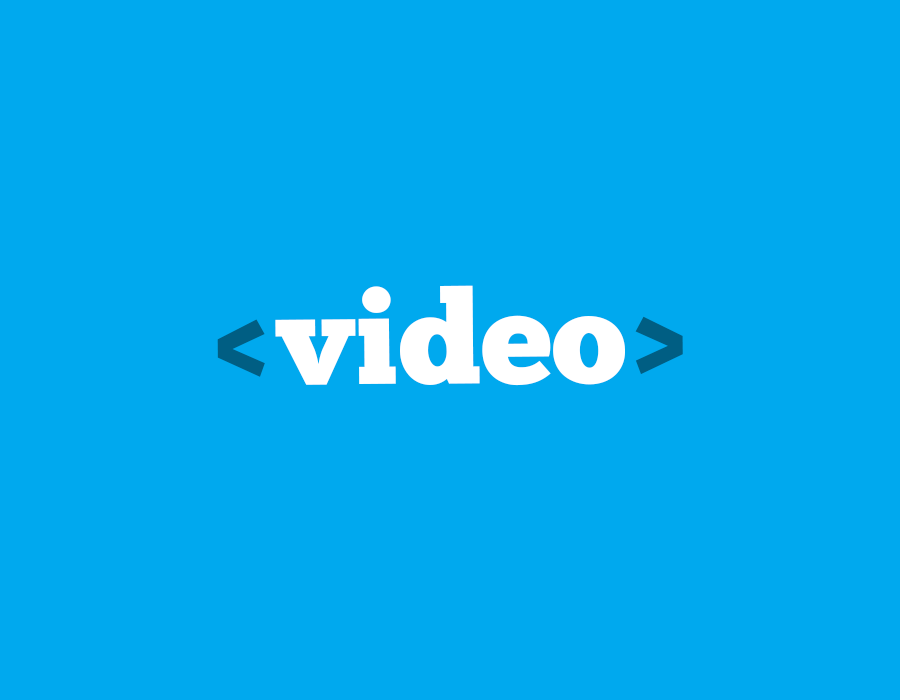
<style>
.page{position:relative;width:900px;height:700px;background:#00a9ee}
.page>*{position:absolute;margin:0}
.t1{font:130.1px "ChunkFive-Roman";color:#ffffff}
.t2{font:130.1px "ChunkFive-Roman";color:#005e83}
</style>
<div class="page">
<p class="t1" style="left:217px;top:285px;width:466px;height:101px"><span class="t2">&lt;</span>video<span class="t2">&gt;</span></p>
</div>
